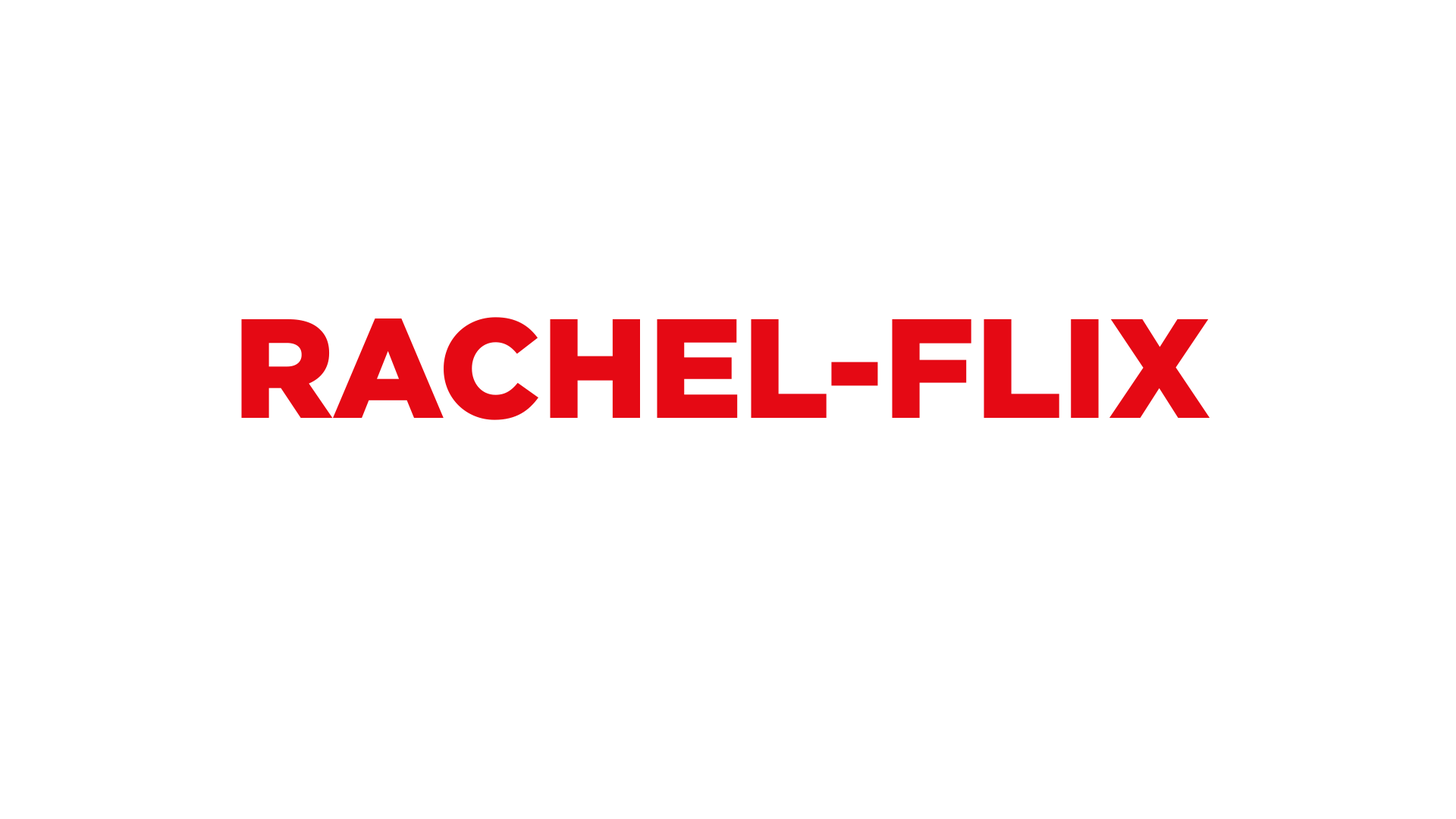
<style>
.page{position:relative;width:1456px;height:819px;background:#ffffff}
.page>*{position:absolute;margin:0}
.t1{font:140.8px "Gotham-Black";color:#e50914}
</style>
<div class="page">
<p class="t1" style="left:241px;top:317px;width:969px;height:103px">RACHEL-FLIX</p>
</div>
